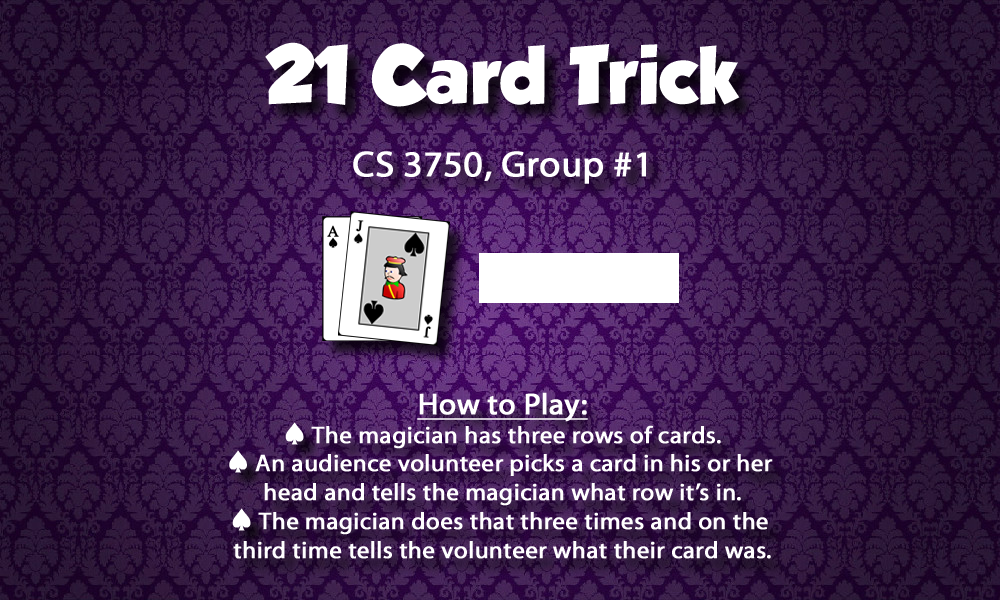
<style>
.page{position:relative;width:1000px;height:600px}
.page>*{position:absolute;margin:0}
.t1{font:24px "MyriadWebPro";color:#ffffff;font-weight:bold}
.t2{font:72px "GROBOLD";color:#ffffff}
.t3{font:36px "MyriadWebPro";color:#ffffff;font-weight:bold}
.t4{font:30px "MyriadWebPro";color:#ffffff;font-weight:bold;text-decoration:underline}
.t5{font:24px "CardCharacters";color:#ffffff;font-weight:bold}
</style>
<div class="page">
<p class="t1" style="left:229px;top:42px;width:544px;height:517px;text-align:center"><span class="t2">21 Card Trick<br><br></span><span class="t3">CS 3750, Group #1<br><br><br><br><br><br><br><br></span><span class="t4">How to Play:<br></span><span class="t5">}</span> The magician has three rows of cards.<br><span class="t5">}</span> An audience volunteer picks a card in his or her <br>head and tells the magician what row it’s in.<br><span class="t5">}</span> The magician does that three times and on the <br>third time tells the volunteer what their card was.</p>
</div>
